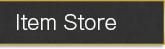
<style>
.page{position:relative;width:165px;height:49px}
.page>*{position:absolute;margin:0}
.t1{font:20px "GothicMB101Pro-Light";color:#fbfbf9}
</style>
<div class="page">
<p class="t1" style="left:17px;top:14px;width:99px;height:16px">Item Store</p>
</div>
